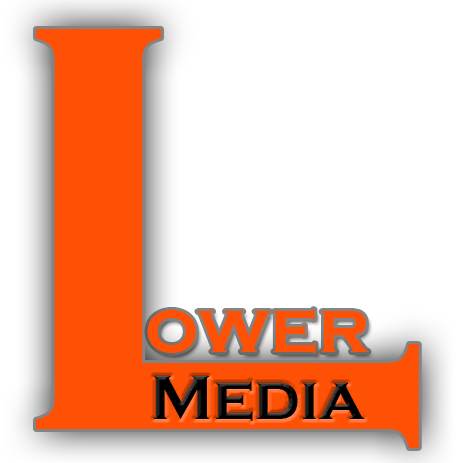
<style>
.page{position:relative;width:462px;height:463px;background:#ffffff}
.page>*{position:absolute;margin:0}
.t1{font:600px "CopperplateGothic-Bold";color:#ff5105}
.t2{font:75px "CopperplateGothic-Bold";color:#ff5105}
.t3{font:65px "CopperplateGothic-Bold";color:#010000}
</style>
<div class="page">
<p class="t1" style="left:36px;top:29px;width:383px;height:419px">L</p>
<p class="t2" style="left:147px;top:309px;width:222px;height:45px">ower</p>
<p class="t3" style="left:153px;top:376px;width:212px;height:45px">Media</p>
</div>
